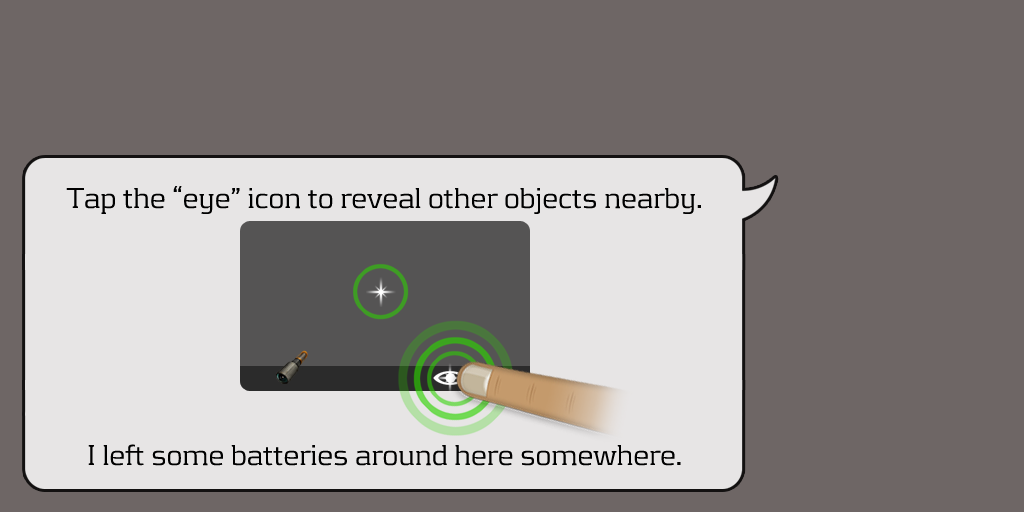
<style>
.page{position:relative;width:1024px;height:512px;background:#6e6665}
.page>*{position:absolute;margin:0}
.t1{font:30px "KontrapunktLight";color:#000000}
</style>
<div class="page">
<p class="t1" style="left:66px;top:186px;width:635px;height:28px">Tap the “eye” icon to reveal other objects nearby.</p>
<p class="t1" style="left:88px;top:444px;width:593px;height:22px">I left some batteries around here somewhere.</p>
</div>
